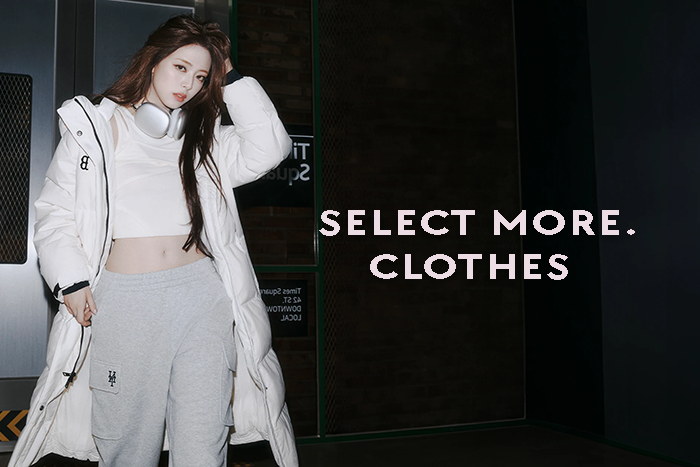
<style>
.page{position:relative;width:700px;height:467px}
.page>*{position:absolute;margin:0}
.t1{font:37px "TTChocolates-Bold";letter-spacing:0.04em;color:#ecdde4;scale:1.26 1}
</style>
<div class="page">
<p class="t1" style="left:319px;top:210px;width:316px;height:26px">SELECT MORE.</p>
<p class="t1" style="left:370px;top:254px;width:198px;height:26px">CLOTHES</p>
</div>
